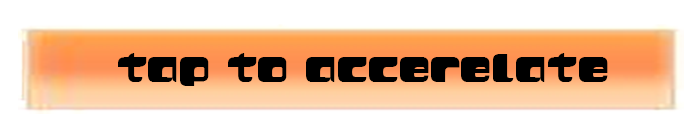
<style>
.page{position:relative;width:700px;height:140px;background:#ffffff}
.page>*{position:absolute;margin:0}
.t1{font:48.6px "AddFatMan";color:#000000}
</style>
<div class="page">
<p class="t1" style="left:118px;top:53px;width:490px;height:33px">tap to accerelate</p>
</div>
